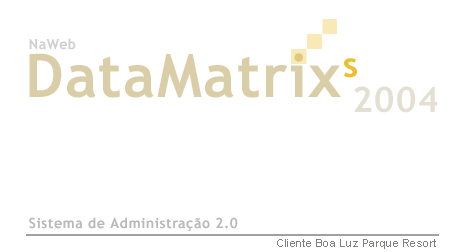
<style>
.page{position:relative;width:457px;height:252px;background:#ffffff}
.page>*{position:absolute;margin:0}
.t1{font:24px "TrebuchetMS-Bold";letter-spacing:0.025em;color:#d0d0d0}
.t2{font:60px "TrebuchetMS-Bold";letter-spacing:0.025em;color:#dacea9}
.t3{font:60px "TrebuchetMS-Bold";letter-spacing:0.025em;color:#edbe2d}
.t4{font:60px "TrebuchetMS-Bold";letter-spacing:0.025em;color:#e3dfd2}
.t5{font:24px "TrebuchetMS-Bold";letter-spacing:0.025em;color:#bbb8b8}
.t6{font:18px "ArialMT";letter-spacing:0.025em;color:#847f7f}
</style>
<div class="page">
<p class="t1" style="left:29px;top:38px;width:47px;height:12px">NaWeb</p>
<p class="t2" style="left:29px;top:53px;width:328px;height:45px">DataMatrix<span class="t3">s</span></p>
<p class="t4" style="left:354px;top:86px;width:84px;height:27px">2004</p>
<p class="t5" style="left:29px;top:217px;width:209px;height:14px">Sistema de Administração 2.0</p>
<p class="t6" style="left:277px;top:239px;width:159px;height:10px">Cliente Boa Luz Parque Resort</p>
</div>
